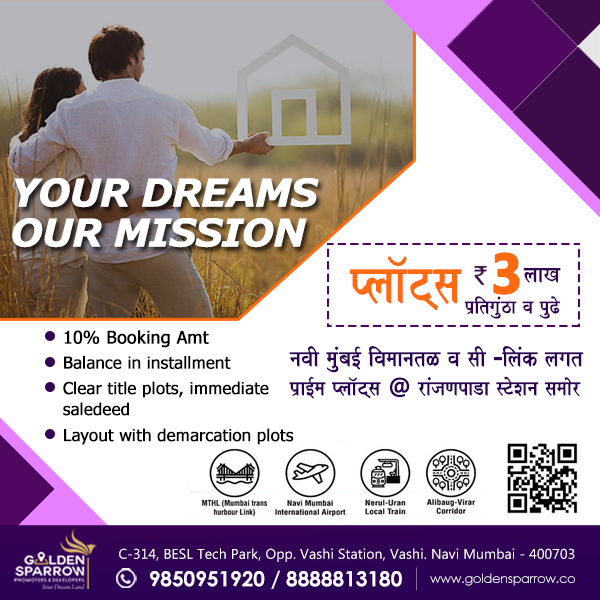
<style>
.page{position:relative;width:600px;height:600px;background:#ffffff}
.page>*{position:absolute;margin:0}
.t1{font:38px/40px "Verdana-BoldItalic";letter-spacing:-0.045em;color:#ffffff;text-transform:uppercase;font-weight:bold}
.t2{font:62.8px "Shivaji01";letter-spacing:-0.005em;color:#ff690f;font-weight:bold;scale:0.89 1}
.t3{font:55.9px "SegoeUI-Bold";letter-spacing:-0.005em;color:#ff690f;font-weight:bold}
.t4{font:26.7px "Shivaji01";letter-spacing:-0.005em;color:#330153;font-weight:bold}
.t5{font:22.4px "Shivaji01";letter-spacing:-0.005em;color:#340153;font-weight:bold}
.t6{font:17.6px "Tahoma";letter-spacing:-0.005em;color:#000000;font-weight:bold}
.t7{font:26.1px "Shivaji01";letter-spacing:-0.005em;color:#2b0155;font-weight:bold}
.t8{font:16.5px "Tahoma";letter-spacing:-0.005em;color:#000000;font-weight:bold}
.t9{font:24px "Shivaji01";letter-spacing:-0.005em;color:#2b0155;font-weight:bold}
.t10{font:24.3px "Shivaji01";letter-spacing:-0.005em;color:#2b0155;font-weight:bold}
.t11{font:23.3px "SegoeUISymbol";letter-spacing:-0.005em;color:#2b0155;font-weight:bold}
.t12{font:16.5px/21.1px "Tahoma";letter-spacing:-0.005em;color:#000000;font-weight:bold}
.t13{font:14px "MyanmarText";letter-spacing:0.015em;color:#ffffff}
.t14{font:21.1px "CenturyGothic-Bold";letter-spacing:-0.005em;color:#fcfcfc}
.t15{font:12.6px "CenturyGothic";letter-spacing:-0.005em;color:#fcfcfc}
</style>
<div class="page">
<p class="t1" style="left:12px;top:178px;width:307px;height:70px;text-align:center">Your Dreams Our Mission</p>
<p class="t2" style="left:349px;top:256px;width:113px;height:55px">Plaa^T\sa</p>
<p class="t3" style="left:493px;top:252px;width:27px;height:43px">3</p>
<p class="t4" style="left:523px;top:268px;width:38px;height:15px">laaK</p>
<p class="t5" style="left:464px;top:296px;width:96px;height:23px">p`itgauMza va puZo</p>
<p class="t6" style="left:64px;top:330px;width:145px;height:18px">10% Booking Amt</p>
<p class="t7" style="left:289px;top:346px;width:295px;height:27px">navaI mauMbaš ivamaanatL va saI ¹ilaMk lagat</p>
<p class="t8" style="left:64px;top:356px;width:167px;height:13px">Balance in installment</p>
<p class="t9" style="left:289px;top:376px;width:292px;height:23px"><span class="t10">p`ašma Plaa^T\sa </span><span class="t11">@ </span>raMjaNapaDa sToXana samaÜr</p>
<p class="t12" style="left:63px;top:381px;width:206px;height:35px">Clear title plots, immediate saledeed</p>
<p class="t8" style="left:64px;top:428px;width:230px;height:17px">Layout with demarcation plots</p>
<p class="t13" style="left:119px;top:548px;width:456px;height:14px">C-314, BESL Tech Park, Opp. Vashi Station, Vashi. Navi Mumbai - 400703</p>
<p class="t14" style="left:150px;top:570px;width:252px;height:19px">9850951920 / 8888813180</p>
<p class="t15" style="left:430px;top:573px;width:145px;height:13px">www.goldensparrow.co</p>
</div>
